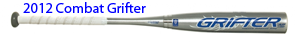
<style>
.page{position:relative;width:300px;height:42px;background:#ffffff}
.page>*{position:absolute;margin:0}
.t1{font:14.4px "MyriadPro-Regular";color:#0000ff}
</style>
<div class="page">
<p class="t1" style="left:23px;top:2px;width:123px;height:11px">2012 Combat Grifter</p>
</div>
